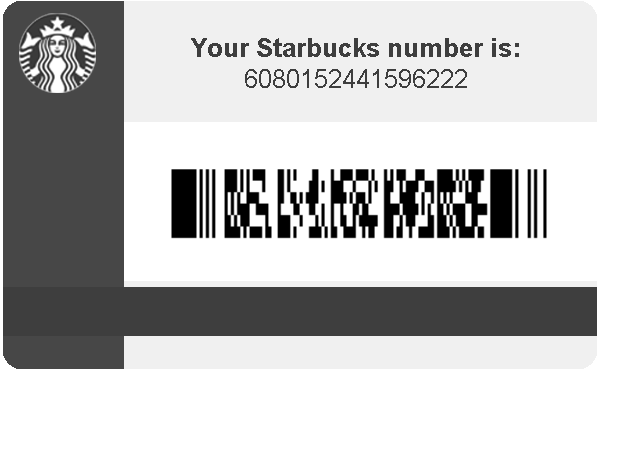
<style>
.page{position:relative;width:636px;height:450px;background:#ffffff}
.page>*{position:absolute;margin:0}
.t1{font:26px "Arial-BoldMT";color:#3e3e3e}
.t2{font:26px "ArialMT";color:#3e3e3e}
</style>
<div class="page">
<p class="t1" style="left:191px;top:38px;width:328px;height:50px;text-align:center">Your Starbucks number is:<br><span class="t2">6080152441596222</span></p>
</div>
